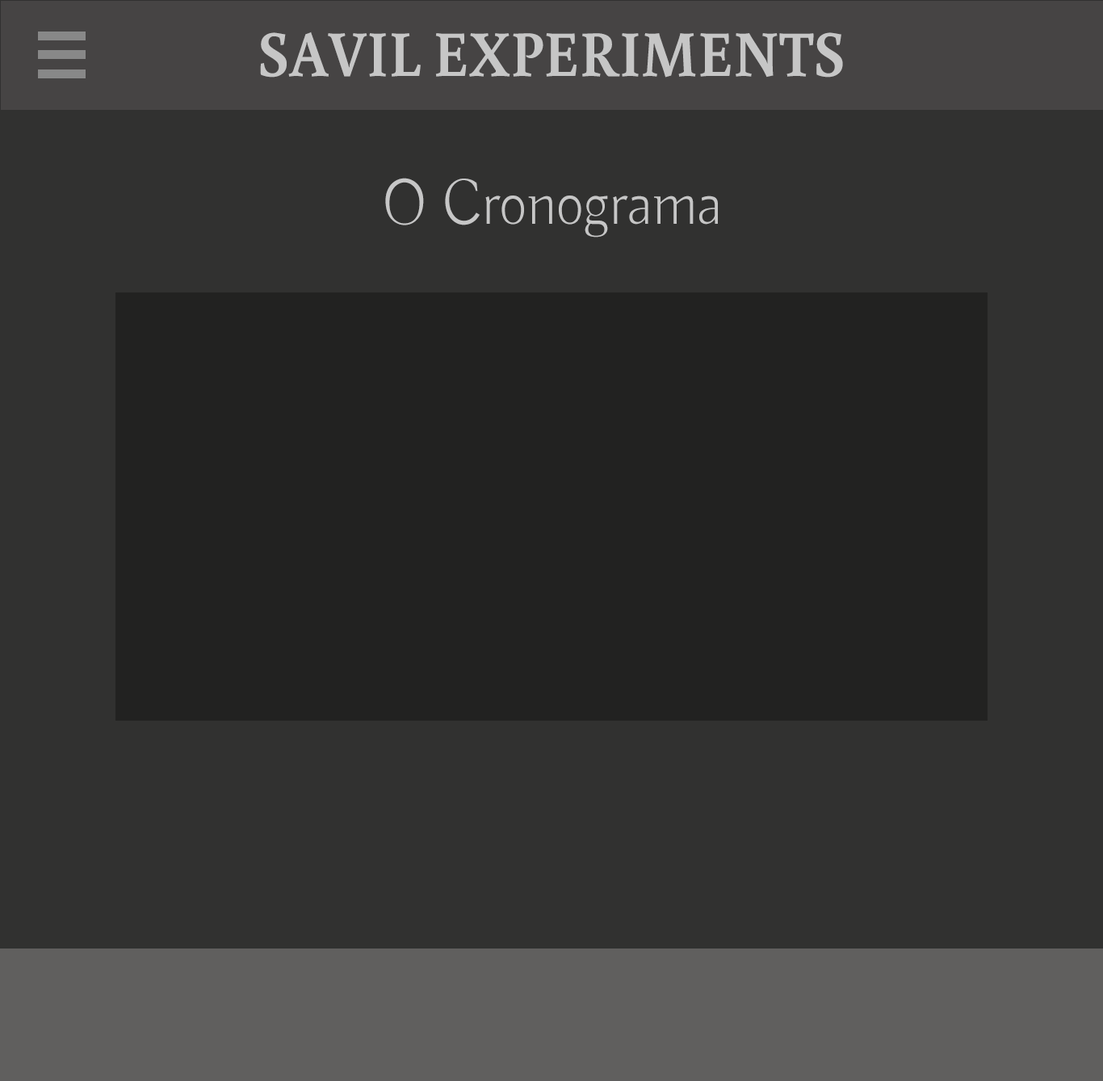
<style>
.page{position:relative;width:1103px;height:1081px;background:#313130}
.page>*{position:absolute;margin:0}
.t1{font:64.9px "Buenard-Bold";color:#c6c6c6;scale:0.92 1}
.t2{font:64.9px "Buda-Light";color:#c6c6c6;scale:0.92 1}
</style>
<div class="page">
<p class="t1" style="left:260px;top:32px;width:583px;height:46px">SAVIL EXPERIMENTS</p>
<p class="t2" style="left:385px;top:178px;width:333px;height:59px">O Cronograma</p>
</div>
